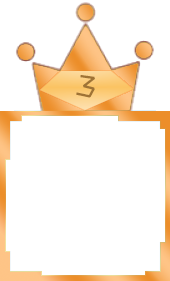
<style>
.page{position:relative;width:170px;height:281px;background:#ffffff}
.page>*{position:absolute;margin:0}
.t1{font:30px "HappyZcool-2016";color:#9f7335}
</style>
<div class="page">
<p class="t1" style="left:76px;top:75px;width:19px;height:23px">3</p>
</div>
